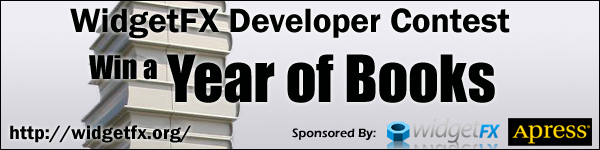
<style>
.page{position:relative;width:600px;height:150px}
.page>*{position:absolute;margin:0}
.t1{font:35px "FranklinGothic-Demi";color:#000101}
.t2{font:60px "Impact";color:#000101}
.t3{font:30px "Impact";color:#000101}
.t4{font:20px "FranklinGothic-Demi";color:#000101}
.t5{font:12.5px "ErasITC-Demi";color:#000101}
</style>
<div class="page">
<p class="t1" style="left:70px;top:8px;width:440px;height:31px">WidgetFX Developer Contest</p>
<p class="t2" style="left:166px;top:54px;width:329px;height:49px">Year of Books</p>
<p class="t3" style="left:89px;top:55px;width:68px;height:25px">Win a</p>
<p class="t4" style="left:10px;top:125px;width:181px;height:18px">http://widgetfx.org/</p>
<p class="t5" style="left:292px;top:128px;width:84px;height:12px">Sponsored By:</p>
</div>
